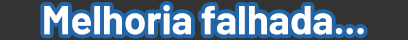
<style>
.page{position:relative;width:408px;height:40px;background:#333333}
.page>*{position:absolute;margin:0}
.t1{font:40px "Barlow-Bold";color:#ffffff}
</style>
<div class="page">
<p class="t1" style="left:44px;top:5px;width:320px;height:30px">Melhoria falhada...</p>
</div>
